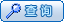
<style>
.page{position:relative;width:64px;height:22px}
.page>*{position:absolute;margin:0}
.t1{font:12px "FZY4JW--GB1-0";color:#bee9ff}
</style>
<div class="page">
<p class="t1" style="left:25px;top:5px;width:27px;height:12px">查 询</p>
</div>
